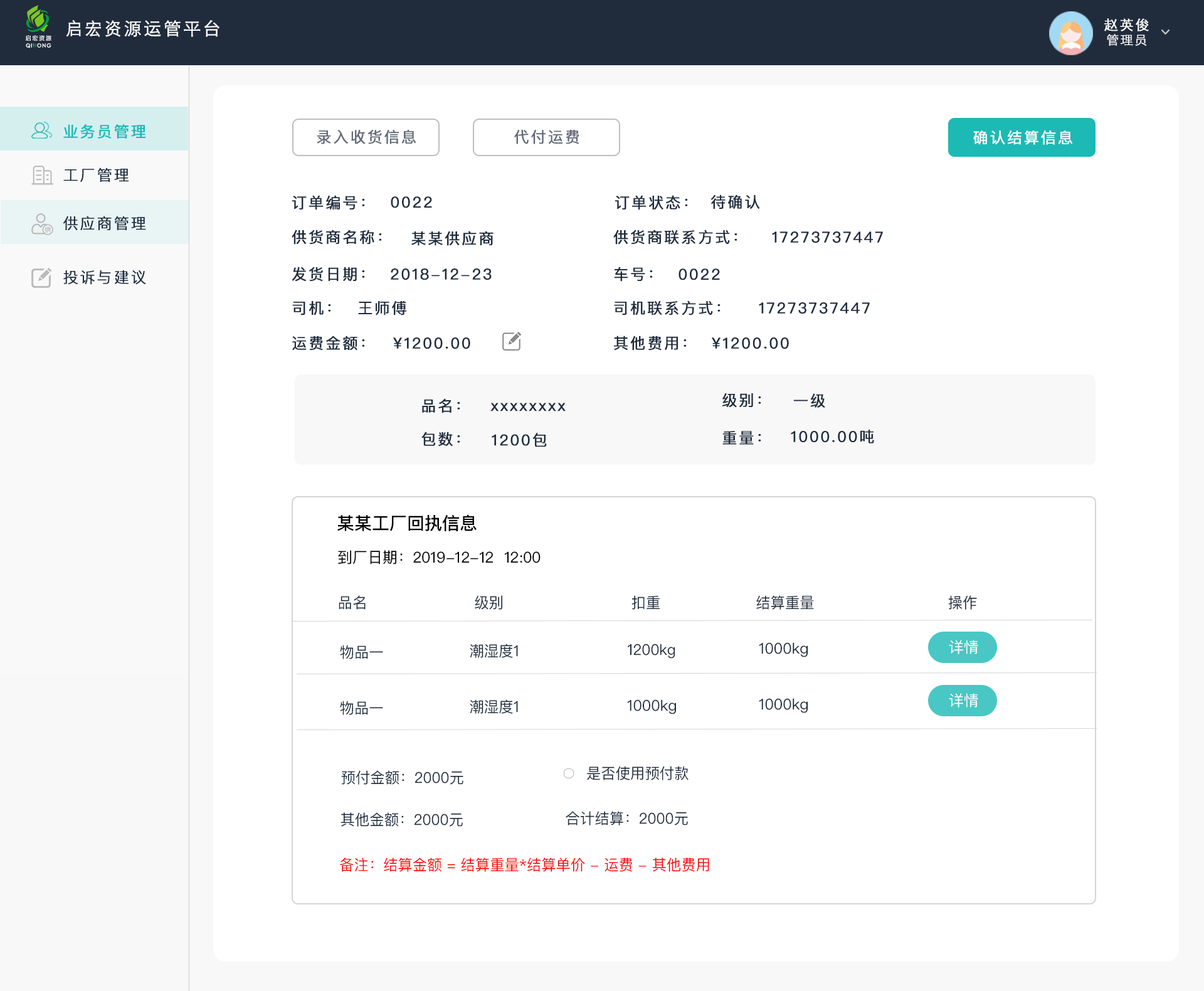
<style>
.page{position:relative;width:1204px;height:991px;background:#ffffff}
.page>*{position:absolute;margin:0}
.t1{font:17.6px "STHeitiSC-Light";letter-spacing:0.1em;color:#ffffff;font-weight:bold}
.t2{font:13.8px "STHeitiSC-Light";letter-spacing:0.1em;color:#ffffff;font-weight:bold}
.t3{font:5.8px "FZLTZHK--GBK1-0";letter-spacing:0.18em;color:#ffffff}
.t4{font:12.5px "STHeitiSC-Light";letter-spacing:0.1em;color:#ffffff;font-weight:bold}
.t5{font:5.2px "CenturyGothic";letter-spacing:0.1em;color:#ffffff;font-weight:bold}
.t6{font:15px "PingFangSC-Regular";letter-spacing:0.1em;color:#1cb9b5;font-weight:bold}
.t7{font:15px "PingFangSC-Regular";letter-spacing:0.1em;color:#626b78;font-weight:bold}
.t8{font:15px "PingFangSC-Regular";letter-spacing:0.1em;color:#ffffff;font-weight:bold}
.t9{font:15px "PingFangSC-Light";letter-spacing:0.1em;color:#1e2c3e;font-weight:bold}
.t10{font:15px "PingFangSC-Regular";letter-spacing:0.1em;color:#1e2c3e;font-weight:bold}
.t11{font:17.6px "PingFangSC-Medium";color:#000000}
.t12{font:15px "PingFangSC-Regular";color:#000000}
.t13{font:15px "PingFangSC-Regular";color:#1e2c3e}
.t14{font:15px "PingFangSC-Regular";color:#ffffff}
.t15{font:15px "PingFangSC-Regular";color:#ff0000}
</style>
<div class="page">
<p class="t1" style="left:66px;top:20px;width:153px;height:17px">启宏资源运管平台</p>
<p class="t2" style="left:1104px;top:18px;width:45px;height:13px">赵英俊</p>
<p class="t3" style="left:26px;top:35px;width:25px;height:6px">启宏资源</p>
<p class="t4" style="left:1107px;top:34px;width:40px;height:12px;opacity:0.9">管理员</p>
<p class="t5" style="left:26px;top:43px;width:25px;height:5px">QI  ONG</p>
<p class="t6" style="left:63px;top:124px;width:83px;height:15px">业务员管理</p>
<p class="t7" style="left:317px;top:130px;width:99px;height:14px">录入收货信息</p>
<p class="t7" style="left:514px;top:130px;width:65px;height:14px">代付运费</p>
<p class="t8" style="left:973px;top:130px;width:100px;height:15px">确认结算信息</p>
<p class="t9" style="left:63px;top:167px;width:66px;height:15px">工厂管理</p>
<p class="t10" style="left:292px;top:195px;width:73px;height:15px">订单编号：</p>
<p class="t10" style="left:391px;top:196px;width:41px;height:12px">0022</p>
<p class="t10" style="left:614px;top:195px;width:74px;height:15px">订单状态：</p>
<p class="t10" style="left:711px;top:194px;width:49px;height:15px">待确认</p>
<p class="t9" style="left:63px;top:216px;width:83px;height:14px">供应商管理</p>
<p class="t10" style="left:292px;top:229px;width:90px;height:16px">供货商名称：</p>
<p class="t10" style="left:411px;top:231px;width:82px;height:15px">某某供应商</p>
<p class="t10" style="left:613px;top:229px;width:124px;height:16px">供货商联系方式：</p>
<p class="t10" style="left:772px;top:231px;width:111px;height:12px">17273737447</p>
<p class="t9" style="left:63px;top:270px;width:83px;height:15px">投诉与建议</p>
<p class="t10" style="left:292px;top:266px;width:73px;height:16px">发货日期：</p>
<p class="t10" style="left:391px;top:268px;width:101px;height:12px">2018-12-23</p>
<p class="t10" style="left:614px;top:266px;width:39px;height:16px">车号：</p>
<p class="t10" style="left:678px;top:268px;width:42px;height:12px">0022</p>
<p class="t10" style="left:292px;top:301px;width:39px;height:14px">司机：</p>
<p class="t10" style="left:358px;top:300px;width:48px;height:15px">王师傅</p>
<p class="t10" style="left:614px;top:300px;width:106px;height:15px">司机联系方式：</p>
<p class="t10" style="left:759px;top:302px;width:111px;height:11px">17273737447</p>
<p class="t10" style="left:292px;top:335px;width:73px;height:15px">运费金额：</p>
<p class="t10" style="left:393px;top:337px;width:77px;height:12px">¥1200.00</p>
<p class="t10" style="left:614px;top:335px;width:73px;height:15px">其他费用：</p>
<p class="t10" style="left:712px;top:337px;width:77px;height:12px">¥1200.00</p>
<p class="t10" style="left:422px;top:398px;width:38px;height:15px">品名：</p>
<p class="t10" style="left:722px;top:392px;width:39px;height:16px">级别：</p>
<p class="t10" style="left:793px;top:393px;width:32px;height:15px">一级</p>
<p class="t10" style="left:490px;top:403px;width:76px;height:8px">xxxxxxxx</p>
<p class="t10" style="left:421px;top:431px;width:39px;height:15px">包数：</p>
<p class="t10" style="left:492px;top:433px;width:55px;height:14px">1200包</p>
<p class="t10" style="left:722px;top:431px;width:39px;height:14px">重量：</p>
<p class="t10" style="left:791px;top:429px;width:83px;height:14px">1000.00吨</p>
<p class="t11" style="left:337px;top:514px;width:139px;height:17px">某某工厂回执信息</p>
<p class="t12" style="left:338px;top:550px;width:202px;height:14px">到厂日期：2019-12-12  12:00</p>
<p class="t13" style="left:339px;top:595px;width:27px;height:14px">品名</p>
<p class="t13" style="left:475px;top:595px;width:27px;height:14px">级别</p>
<p class="t13" style="left:631px;top:595px;width:29px;height:14px">扣重</p>
<p class="t13" style="left:756px;top:595px;width:58px;height:14px">结算重量</p>
<p class="t13" style="left:948px;top:595px;width:29px;height:14px">操作</p>
<p class="t14" style="left:949px;top:639px;width:29px;height:15px">详情</p>
<p class="t13" style="left:340px;top:645px;width:43px;height:14px">物品一</p>
<p class="t13" style="left:470px;top:643px;width:48px;height:15px">潮湿度1</p>
<p class="t13" style="left:628px;top:643px;width:47px;height:15px">1200kg</p>
<p class="t13" style="left:759px;top:642px;width:49px;height:15px">1000kg</p>
<p class="t13" style="left:340px;top:700px;width:43px;height:15px">物品一</p>
<p class="t13" style="left:470px;top:699px;width:48px;height:14px">潮湿度1</p>
<p class="t13" style="left:627px;top:699px;width:49px;height:15px">1000kg</p>
<p class="t13" style="left:759px;top:698px;width:49px;height:15px">1000kg</p>
<p class="t14" style="left:949px;top:693px;width:29px;height:14px">详情</p>
<p class="t13" style="left:341px;top:770px;width:122px;height:14px">预付金额：2000元</p>
<p class="t13" style="left:587px;top:766px;width:101px;height:14px">是否使用预付款</p>
<p class="t13" style="left:340px;top:812px;width:123px;height:14px">其他金额：2000元</p>
<p class="t13" style="left:566px;top:811px;width:122px;height:14px">合计结算：2000元</p>
<p class="t15" style="left:340px;top:857px;width:369px;height:14px">备注：结算金额 = 结算重量*结算单价 - 运费 - 其他费用</p>
</div>
